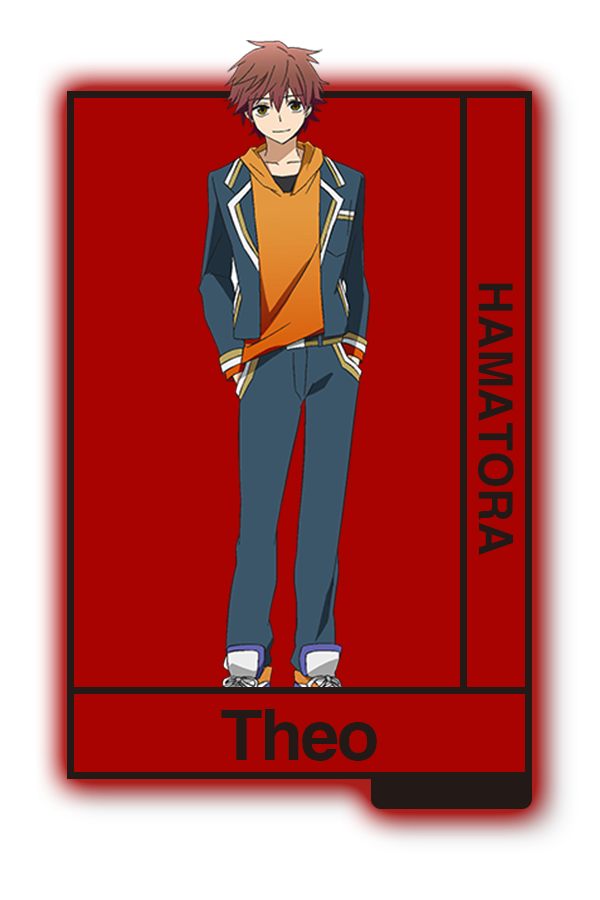
<style>
.page{position:relative;width:600px;height:900px;background:#a80301}
.page>*{position:absolute;margin:0}
.t1{font:47.4px "Helvetica-Bold";color:#231917}
.t2{font:75px "CoolveticaRg-Regular";color:#231917}
</style>
<div class="page">
<p class="t1" style="left:478px;top:283px;width:36px;height:272px;rotate:90deg">HAMATORA</p>
<p class="t2" style="left:221px;top:709px;width:156px;height:52px">Theo</p>
</div>
